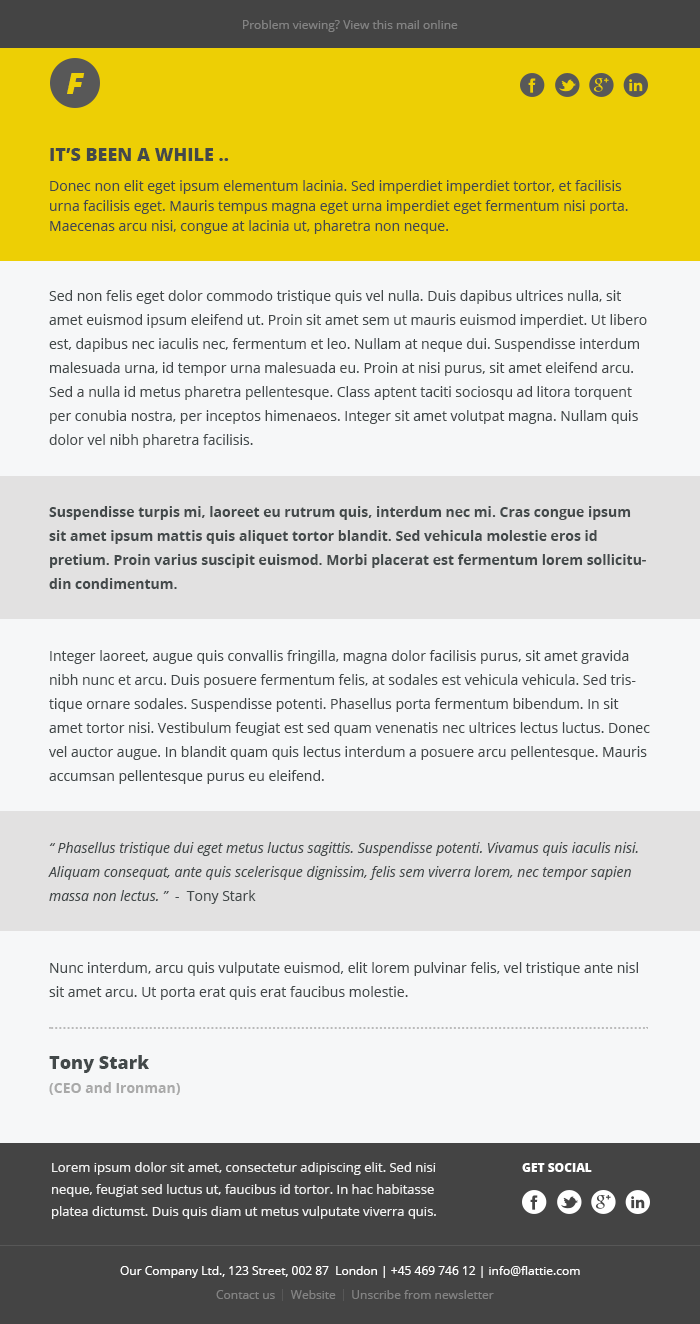
<style>
.page{position:relative;width:700px;height:1324px;background:#f6f7f8}
.page>*{position:absolute;margin:0}
.t1{font:12px "OpenSans";color:#838383}
.t2{font:30px "OpenSans-ExtraboldItalic";color:#edcf05}
.t3{font:14px/20px "OpenSans";color:#43494a}
.t4{font:18px/24px "OpenSans-Extrabold";color:#43494a;text-transform:uppercase}
.t5{font:14px/30px "OpenSans";color:#43494a}
.t6{font:14px "OpenSans";color:#43494a}
.t7{font:14px/24px "OpenSans";color:#43494a}
.t8{font:14px/24px "OpenSans-Bold";color:#43494a}
.t9{font:14px/24px "OpenSans-Italic";color:#43494a}
.t10{font:18px/24px "OpenSans-Extrabold";color:#43494a}
.t11{font:14px/24px "OpenSans-Bold";color:#a9a9a9}
.t12{font:13px/22px "OpenSans";color:#f0f0f0}
.t13{font:12px "OpenSans-Extrabold";color:#ffffff;text-transform:uppercase}
.t14{font:12px "OpenSans";color:#ffffff}
</style>
<div class="page">
<p class="t1" style="left:243px;top:20px;width:215px;height:12px">Problem viewing? View this mail online</p>
<p class="t2" style="left:67px;top:73px;width:18px;height:21px">F</p>
<p class="t3" style="left:50px;top:148px;width:578px;height:86px"><span class="t4">It’s been a while .. <br></span><span class="t5">Donec non elit eget ipsum elementum lacinia. Sed imperdiet imperdiet </span><span class="t6">tortor, et facilisis </span>urna facilisis eget. Mauris tempus magna eget urna imperdiet eget fermentum nisi porta. Maecenas arcu nisi, congue at lacinia ut, pharetra non neque.</p>
<p class="t7" style="left:48px;top:290px;width:602px;height:805px">Sed non felis eget dolor commodo tristique quis vel nulla. Duis dapibus ultrices nulla, sit amet euismod ipsum eleifend ut. Proin sit amet sem ut mauris euismod imperdiet. Ut libero est, dapibus nec iaculis nec, fermentum et leo. Nullam at neque dui. Suspendisse interdum malesuada urna, id tempor urna malesuada eu. Proin at nisi purus, sit amet eleifend arcu. Sed a nulla id metus pharetra pellentesque. Class aptent taciti sociosqu ad litora torquent per conubia nostra, per inceptos himenaeos. Integer sit amet volutpat magna. Nullam quis dolor vel nibh pharetra facilisis.<br><br><span class="t8"><br>Suspendisse turpis mi, laoreet eu rutrum quis, interdum nec mi. Cras congue ipsum sit amet ipsum mattis quis aliquet tortor blandit. Sed vehicula molestie eros id pretium. Proin varius suscipit euismod. Morbi placerat est fermentum lorem sollicitudin condimentum. <br><br><br></span>Integer laoreet, augue quis convallis fringilla, magna dolor facilisis purus, sit amet gravida nibh nunc et arcu. Duis posuere fermentum felis, at sodales est vehicula vehicula. Sed tristique ornare sodales. Suspendisse potenti. Phasellus porta fermentum bibendum. In sit amet tortor nisi. Vestibulum feugiat est sed quam venenatis nec ultrices lectus luctus. Donec vel auctor augue. In blandit quam quis lectus interdum a posuere arcu pellentesque. Mauris accumsan pellentesque purus eu eleifend.<br><br><br><span class="t9">“ Phasellus tristique dui eget metus luctus sagittis. Suspendisse potenti. Vivamus quis iaculis nisi. Aliquam consequat, ante quis scelerisque dignissim, felis sem viverra lorem, nec tempor sapien massa non lectus. ”  -  </span>Tony Stark<br><br><br>Nunc interdum, arcu quis vulputate euismod, elit lorem pulvinar felis, vel tristique ante nisl sit amet arcu. Ut porta erat quis erat faucibus molestie. <br><br><br><span class="t10">Tony Stark <br></span><span class="t11">(CEO and Ironman)</span></p>
<p class="t12" style="left:52px;top:1162px;width:384px;height:57px">Lorem ipsum dolor sit amet, consectetur adipiscing elit. Sed nisi neque, feugiat sed luctus ut, faucibus id tortor. In hac habitasse platea dictumst. Duis quis diam ut metus vulputate viverra quis.</p>
<p class="t13" style="left:522px;top:1163px;width:70px;height:9px">GET SOCIAL</p>
<p class="t14" style="left:120px;top:1266px;width:460px;height:12px">Our Company Ltd., 123 Street, 002 87  London | +45 469 746 12 | info@flattie.com</p>
<p class="t1" style="left:216px;top:1290px;width:278px;height:9px">Contact us     Website     Unscribe from newsletter</p>
</div>
